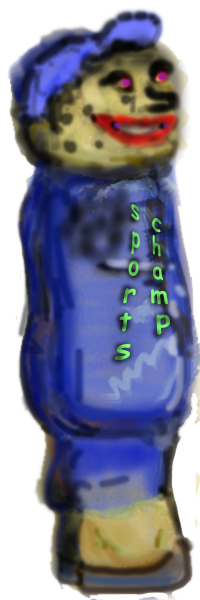
<style>
.page{position:relative;width:200px;height:600px;background:#ffffff}
.page>*{position:absolute;margin:0}
.t1{font:26px "ComicSansMS-Bold"}
</style>
<div class="page">
<p class="t1" style="left:114px;top:204px;width:56px;height:156px">champ<br>sports</p>
</div>
